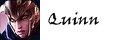
<style>
.page{position:relative;width:140px;height:40px;background:#ffffff}
.page>*{position:absolute;margin:0}
.t1{font:12px "VinerHandITC";color:#000000}
</style>
<div class="page">
<p class="t1" style="left:48px;top:12px;width:52px;height:14px">Quinn</p>
</div>
